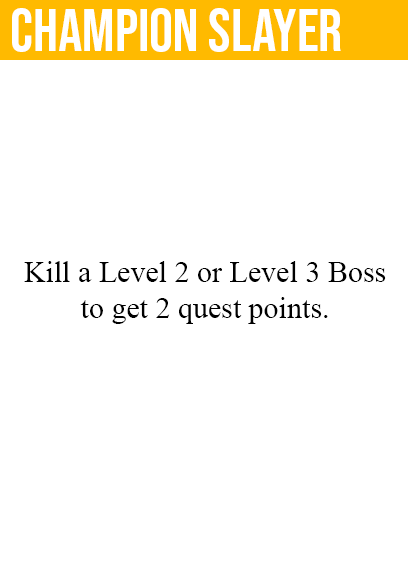
<style>
.page{position:relative;width:408px;height:585px;background:#ffffff}
.page>*{position:absolute;margin:0}
.t1{font:60px "BebasNeue-Regular";color:#ffffff}
.t2{font:30px "TimesNewRomanPSMT";color:#000000}
</style>
<div class="page">
<p class="t1" style="left:12px;top:8px;width:329px;height:44px">champion slayer</p>
<p class="t2" style="left:24px;top:261px;width:362px;height:63px;text-align:center">Kill a Level 2 or Level 3 Boss<br>to get 2 quest points.</p>
</div>
